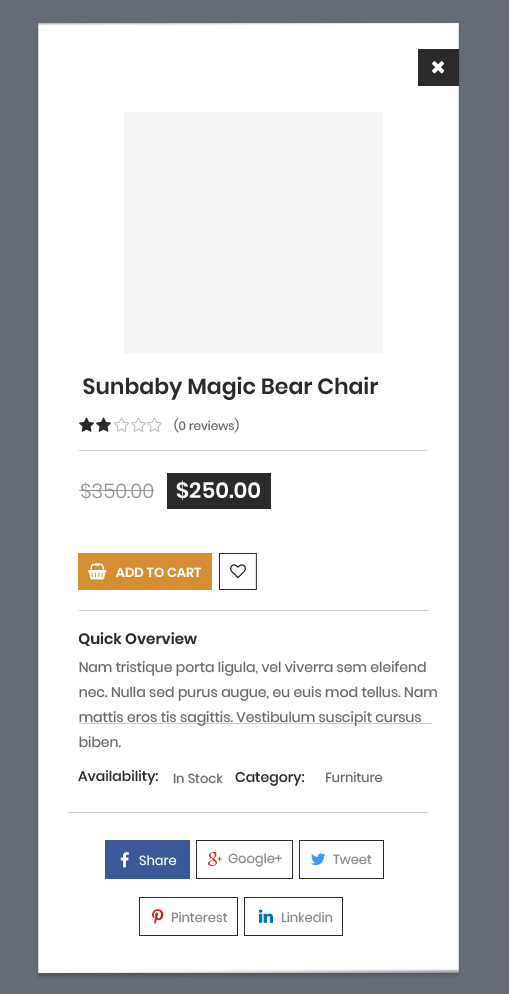
<style>
.page{position:relative;width:509px;height:994px;background:#ffffff}
.page>*{position:absolute;margin:0}
.t1{font:22px "Poppins-SemiBold";color:#2a2a2a}
.t2{font:12px "Poppins-Regular";color:#676767}
.t3{font:20px "Poppins-Light";color:#939393}
.t4{font:22px "Poppins-SemiBold";color:#ffffff}
.t5{font:13px "Poppins-SemiBold";color:#ffffff;text-transform:uppercase}
.t6{font:15px "Poppins-SemiBold";color:#2a2a2a}
.t7{font:14px/25px "Poppins-Regular";color:#676767}
.t8{font:14px "Poppins-Medium";color:#2a2a2a}
.t9{font:13px "Poppins-Regular";color:#676767}
.t10{font:13px "Poppins-Regular";color:#ffffff}
.t11{font:13px "Poppins-Regular";color:#888888}
</style>
<div class="page">
<p class="t1" style="left:83px;top:376px;width:295px;height:24px">Sunbaby Magic Bear Chair</p>
<p class="t2" style="left:174px;top:418px;width:65px;height:15px">(0 reviews)</p>
<p class="t3" style="left:81px;top:482px;width:73px;height:18px">$350.00</p>
<p class="t4" style="left:176px;top:480px;width:84px;height:20px">$250.00</p>
<p class="t5" style="left:116px;top:567px;width:86px;height:11px">add to cart</p>
<p class="t6" style="left:78px;top:632px;width:119px;height:15px">Quick Overview</p>
<p class="t7" style="left:79px;top:661px;width:358px;height:87px">Nam tristique porta ligula, vel viverra sem eleifend nec. Nulla sed purus augue, eu euis mod tellus. Nam mattis eros tis sagittis. Vestibulum suscipit cursus biben.</p>
<p class="t8" style="left:78px;top:770px;width:80px;height:15px">Availability:</p>
<p class="t9" style="left:173px;top:773px;width:50px;height:11px">In Stock</p>
<p class="t8" style="left:235px;top:771px;width:148px;height:15px">Category:       <span class="t9">Furniture</span></p>
<p class="t10" style="left:139px;top:855px;width:38px;height:11px">Share</p>
<p class="t11" style="left:228px;top:853px;width:54px;height:14px">Google+</p>
<p class="t11" style="left:333px;top:854px;width:39px;height:11px">Tweet</p>
<p class="t11" style="left:171px;top:911px;width:57px;height:12px">Pinterest</p>
<p class="t11" style="left:281px;top:911px;width:52px;height:12px">Linkedin</p>
</div>
